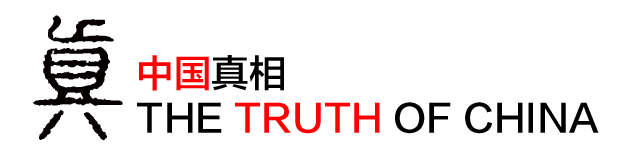
<style>
.page{position:relative;width:625px;height:146px;background:#ffffff}
.page>*{position:absolute;margin:0}
.t1{font:37.5px "FZLTZHK--GBK1-0";color:#000000}
.t2{font:37.5px "FZLTZHK--GBK1-0";color:#ff0000}
</style>
<div class="page">
<p class="t1" style="left:137px;top:55px;width:462px;height:79px"><span class="t2">中国</span>真相<br>THE <span class="t2">TRUTH </span>OF CHINA</p>
</div>
